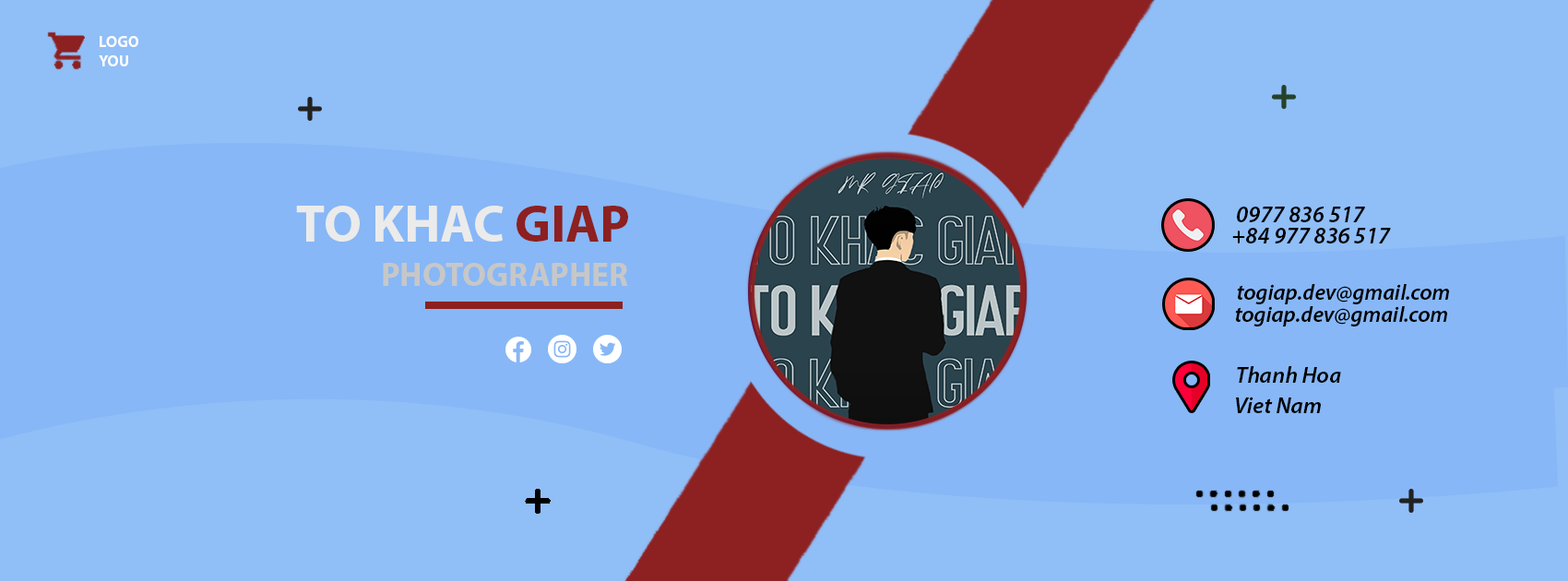
<style>
.page{position:relative;width:1568px;height:581px;background:#90bef7}
.page>*{position:absolute;margin:0}
.t1{font:15.7px "MyriadPro-Bold";color:#ffffff;text-transform:uppercase}
.t2{font:12.6px/70.1px "MyriadPro-Bold";color:#ebebeb}
.t3{font:12.6px/70.1px "MyriadPro-Bold";color:#8d2020}
.t4{font:23.1px "MyriadPro-SemiboldIt";color:#000000}
.t5{font:33.1px "MyriadPro-Bold";color:#c7c7c7;text-transform:uppercase}
.t6{font:22.1px "MyriadPro-SemiboldIt";color:#000000}
</style>
<div class="page">
<p class="t1" style="left:99px;top:36px;width:39px;height:30px">Logo<br>you</p>
<p class="t2" style="left:296px;top:206px;width:332px;height:36px">TO KHAC <span class="t3">GIAP</span></p>
<p class="t4" style="left:1237px;top:207px;width:128px;height:15px">0977 836 517</p>
<p class="t4" style="left:1232px;top:228px;width:159px;height:16px">+84 977 836 517</p>
<p class="t5" style="left:383px;top:263px;width:245px;height:23px">photographer</p>
<p class="t6" style="left:1237px;top:284px;width:212px;height:20px">togiap.dev@gmail.com</p>
<p class="t6" style="left:1235px;top:306px;width:212px;height:21px">togiap.dev@gmail.com</p>
<p class="t4" style="left:1237px;top:366px;width:104px;height:17px">Thanh Hoa</p>
<p class="t4" style="left:1236px;top:397px;width:85px;height:16px">Viet Nam</p>
</div>
